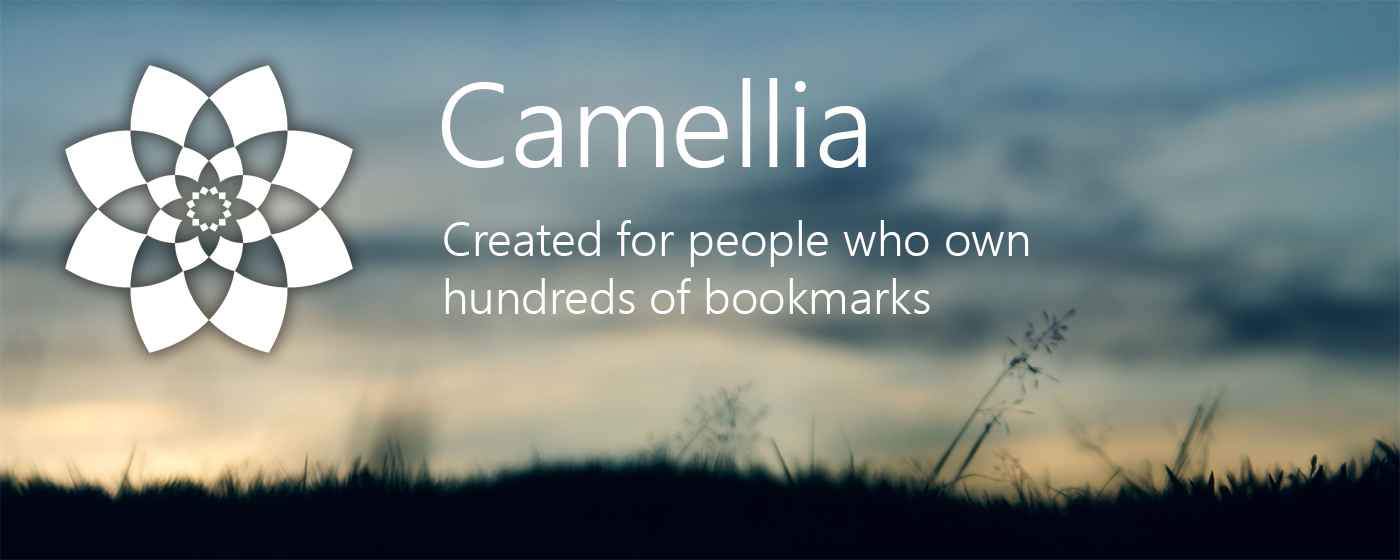
<style>
.page{position:relative;width:1400px;height:560px}
.page>*{position:absolute;margin:0}
.t1{font:120px "SegoeUI-Semilight";color:#ffffff}
.t2{font:48px "SegoeUI-Semilight";color:#ffffff}
</style>
<div class="page">
<p class="t1" style="left:441px;top:78px;width:425px;height:90px">Camellia</p>
<p class="t2" style="left:444px;top:220px;width:585px;height:94px">Created for people who own<br>hundreds of bookmarks</p>
</div>
